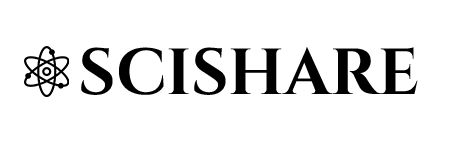
<style>
.page{position:relative;width:450px;height:150px;background:#ffffff}
.page>*{position:absolute;margin:0}
.t1{font:65px "Cinzel-Bold";color:#000000;text-transform:uppercase}
</style>
<div class="page">
<p class="t1" style="left:81px;top:47px;width:337px;height:48px">SciShare</p>
</div>
